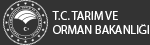
<style>
.page{position:relative;width:150px;height:45px;background:#333333}
.page>*{position:absolute;margin:0}
.t1{font:12px "MyriadPro-Regular";color:#ffffff}
</style>
<div class="page">
<p class="t1" style="left:52px;top:11px;width:97px;height:23px">T.C. TARIM VE <br>ORMAN BAKANLIĞI</p>
</div>
